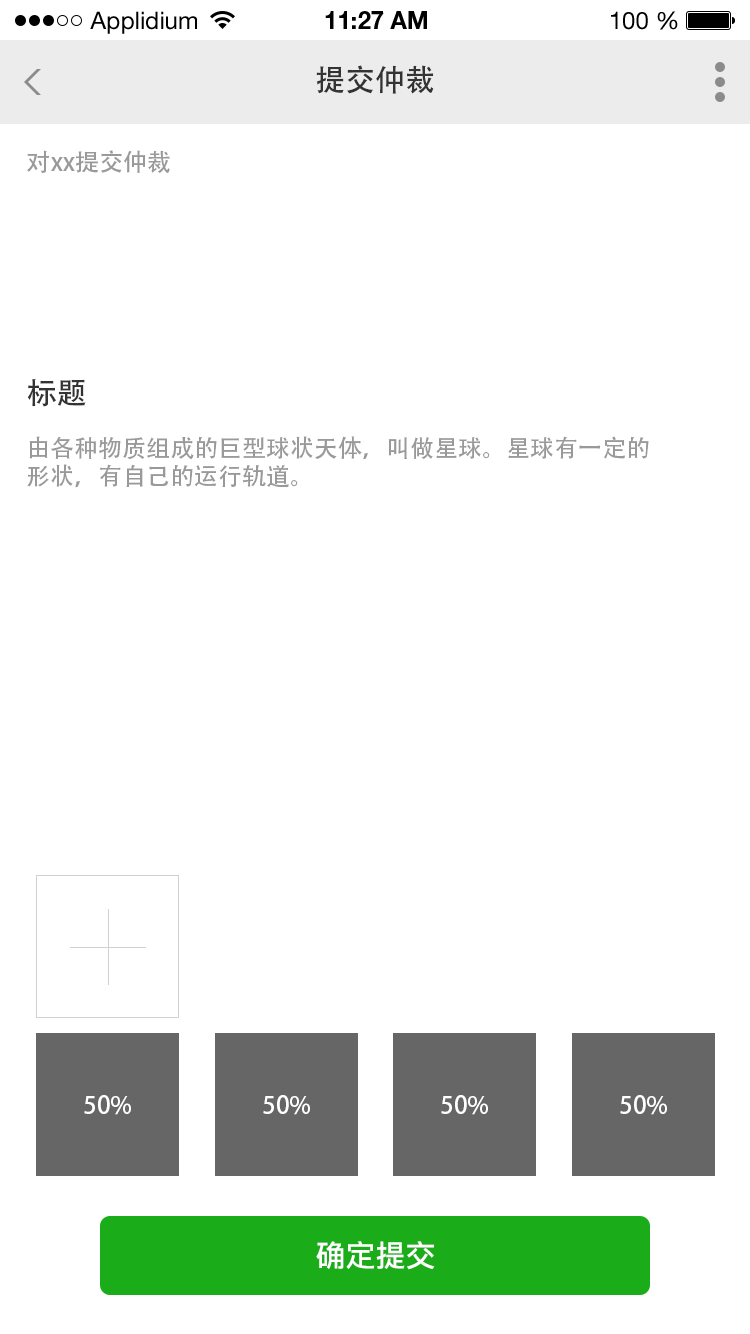
<style>
.page{position:relative;width:750px;height:1334px;background:#ffffff}
.page>*{position:absolute;margin:0}
.t1{font:24px "HelveticaNeueLTStd-Roman";color:#000000}
.t2{font:24px "HelveticaNeueLTStd-Bd";color:#000000}
.t3{font:30px "AdobeHeitiStd-Regular";color:#333333}
.t4{font:24px "AdobeHeitiStd-Regular";color:#999999}
.t5{font:24px/28.3px "AdobeHeitiStd-Regular";color:#999999}
.t6{font:24px "AdobeHeitiStd-Regular";color:#ffffff}
.t7{font:30px "PingFang-SC-Bold";color:#ffffff}
</style>
<div class="page">
<p class="t1" style="left:90px;top:11px;width:107px;height:23px">Applidium</p>
<p class="t2" style="left:325px;top:11px;width:102px;height:18px">11:27 AM</p>
<p class="t1" style="left:611px;top:11px;width:67px;height:19px">100 %</p>
<p class="t3" style="left:316px;top:65px;width:118px;height:29px">提交仲裁</p>
<p class="t4" style="left:27px;top:150px;width:143px;height:23px">对xx提交仲裁</p>
<p class="t3" style="left:27px;top:379px;width:59px;height:28px">标题</p>
<p class="t5" style="left:27px;top:436px;width:622px;height:52px">由各种物质组成的巨型球状天体，叫做星球。星球有一定的<br>形状，有自己的运行轨道。</p>
<p class="t6" style="left:84px;top:1095px;width:47px;height:20px">50%</p>
<p class="t6" style="left:263px;top:1095px;width:47px;height:20px">50%</p>
<p class="t6" style="left:441px;top:1095px;width:47px;height:20px">50%</p>
<p class="t6" style="left:620px;top:1095px;width:47px;height:20px">50%</p>
<p class="t7" style="left:316px;top:1241px;width:119px;height:29px">确定提交</p>
</div>
